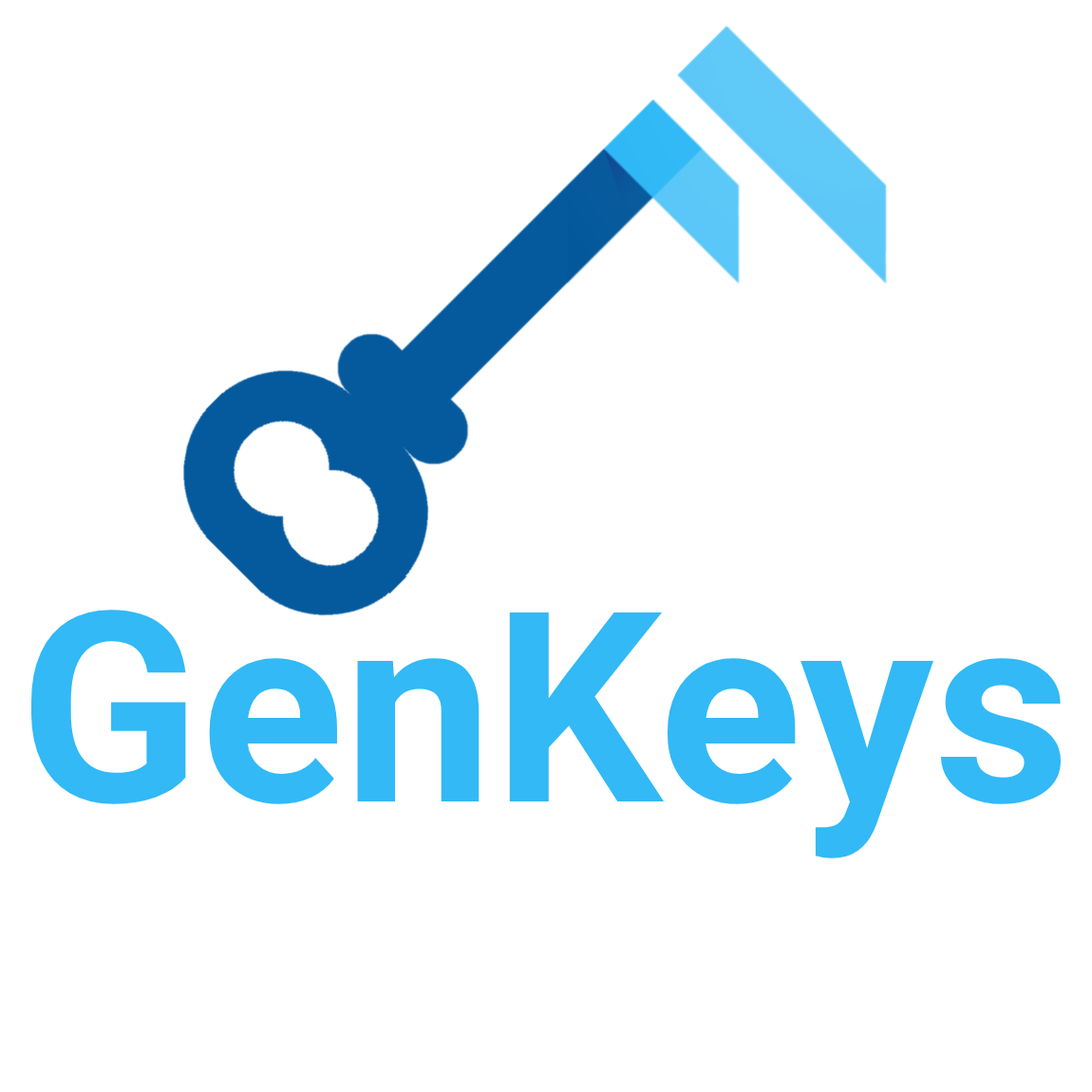
<style>
.page{position:relative;width:1092px;height:1092px;background:#ffffff}
.page>*{position:absolute;margin:0}
.t1{font:265.9px "Roboto-Bold";color:#32b9f6}
</style>
<div class="page">
<p class="t1" style="left:30px;top:610px;width:1032px;height:248px">GenKeys</p>
</div>
